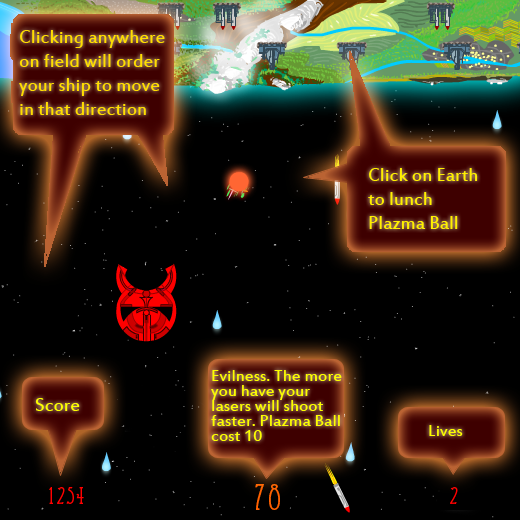
<style>
.page{position:relative;width:520px;height:520px;background:#000000}
.page>*{position:absolute;margin:0}
.t1{font:20px "EstrangeloEdessa";color:#ffde00}
.t2{font:20px "EstrangeloEdessa";color:#fff000}
.t3{font:18px/15px "EstrangeloEdessa";color:#fcff00}
.t4{font:20px "EstrangeloEdessa";color:#fcff00}
.t5{font:18px "EstrangeloEdessa";color:#fcff00}
.t6{font:36px "EccentricStd";color:#ff6000}
.t7{font:24px "EccentricStd";color:#ff0000}
</style>
<div class="page">
<p class="t1" style="left:19px;top:30px;width:146px;height:85px">Clicking anywhere on field will order your ship to move in that direction</p>
<p class="t2" style="left:368px;top:168px;width:110px;height:61px">Click on Earth to lunch Plazma Ball</p>
<p class="t3" style="left:211px;top:370px;width:131px;height:71px">Evilness. The more you have your lasers will shoot faster. Plazma Ball cost 10</p>
<p class="t4" style="left:35px;top:398px;width:45px;height:13px">Score</p>
<p class="t5" style="left:429px;top:425px;width:34px;height:11px">Lives</p>
<p class="t6" style="left:255px;top:484px;width:25px;height:26px">78</p>
<p class="t7" style="left:49px;top:487px;width:35px;height:17px">1254</p>
<p class="t7" style="left:450px;top:487px;width:8px;height:17px">2</p>
</div>
